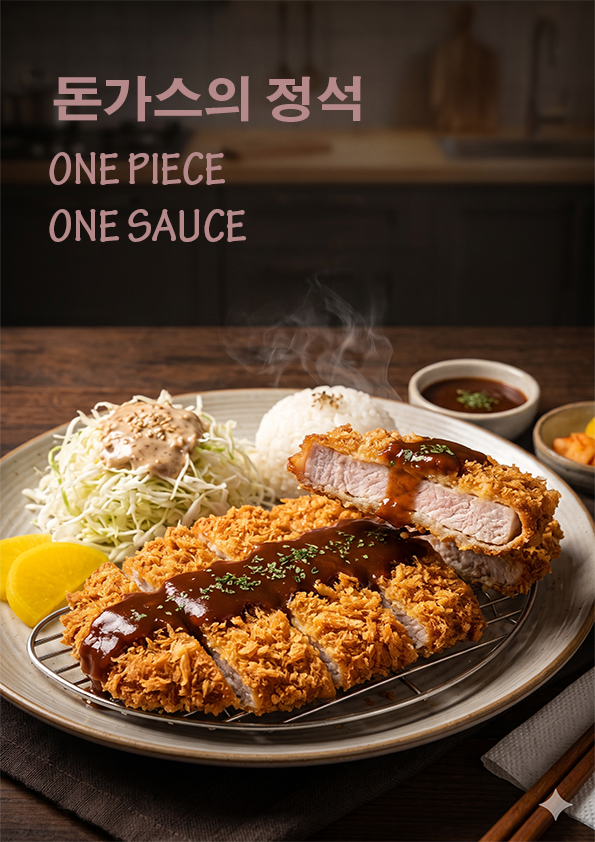
<style>
.page{position:relative;width:595px;height:842px}
.page>*{position:absolute;margin:0}
.t1{font:48px "AdobeGothicStd-Bold";color:#b68a8a;scale:1.05 1}
.t2{font:48px "TektonPro-BoldCond";color:#b68a8a;scale:1.05 1}
</style>
<div class="page">
<p class="t1" style="left:53px;top:76px;width:308px;height:46px">돈가스의 정석</p>
<p class="t2" style="left:49px;top:152px;width:197px;height:90px">ONE PIECE<br>ONE SAUCE</p>
</div>
